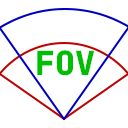
<style>
.page{position:relative;width:128px;height:128px;background:#ffffff}
.page>*{position:absolute;margin:0}
.t1{font:33.3px "JetBrainsMono-ExtraBold";color:#00bf00}
</style>
<div class="page">
<p class="t1" style="left:37px;top:50px;width:58px;height:26px">FOV</p>
</div>
